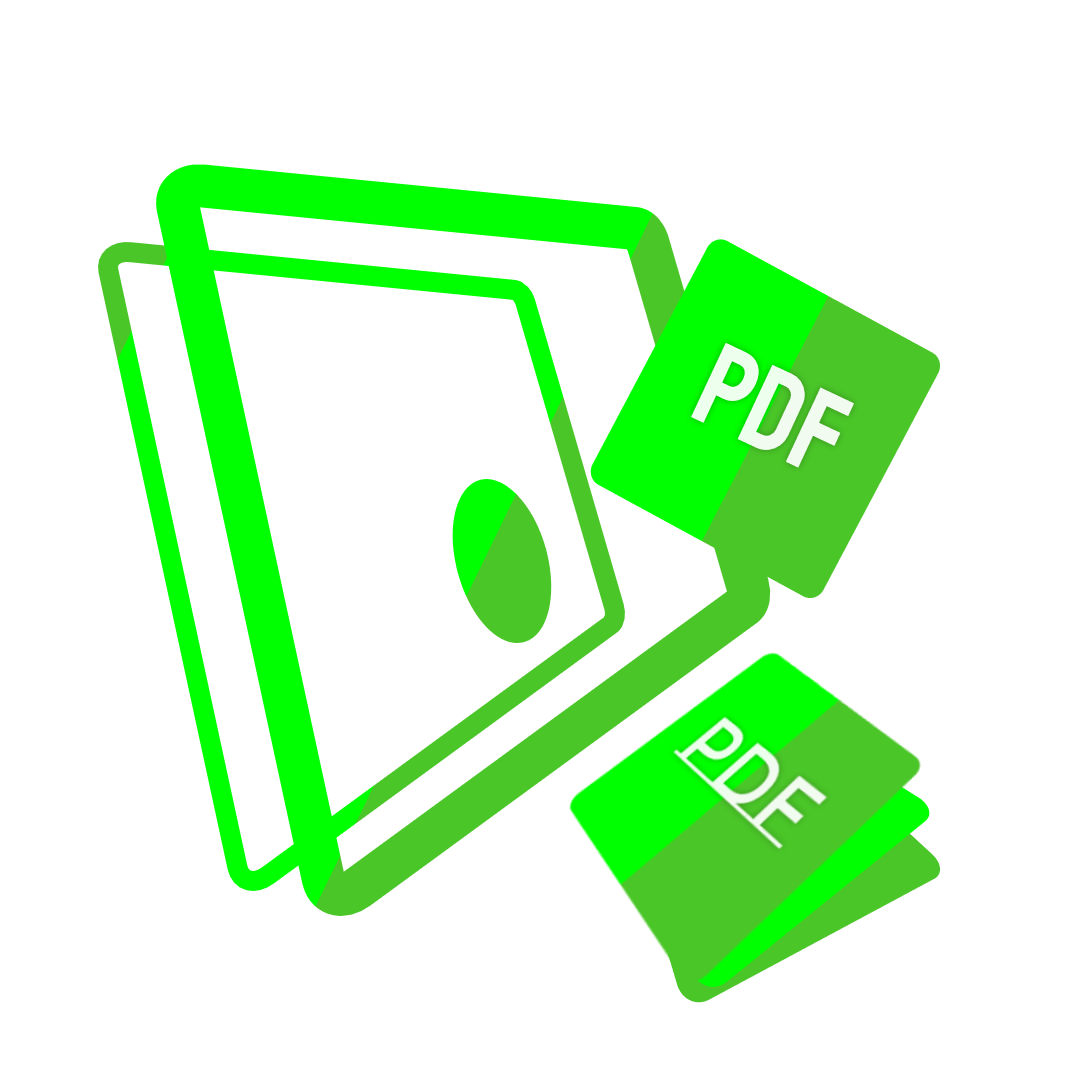
<style>
.page{position:relative;width:1080px;height:1080px;background:#ffffff}
.page>*{position:absolute;margin:0}
.t1{font:117.9px "Koulen-Regular";color:#ffffff;scale:0.96 1}
</style>
<div class="page">
<p class="t1" style="left:691px;top:343px;width:163px;height:125px;rotate:25deg;opacity:0.93">PDF</p>
</div>
